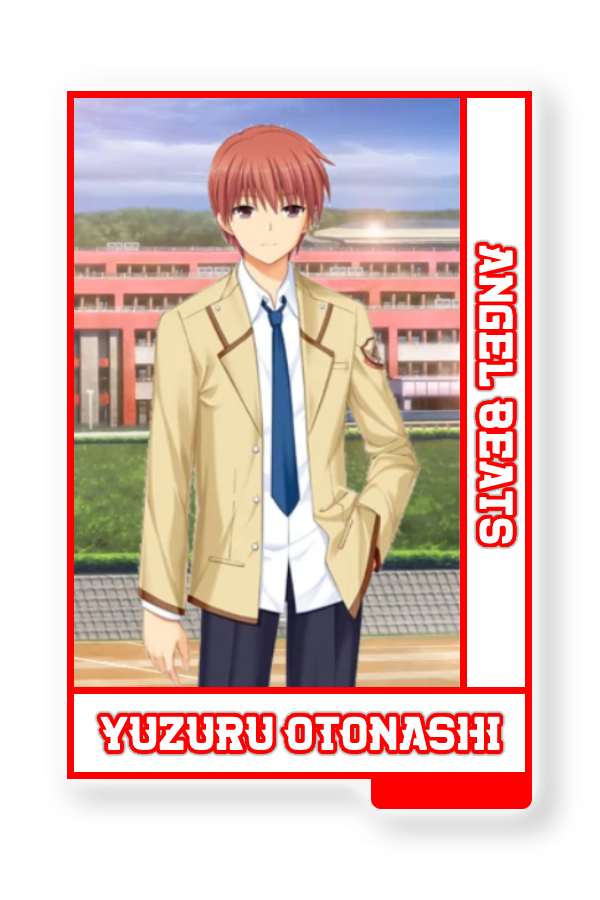
<style>
.page{position:relative;width:600px;height:900px;background:#ffffff}
.page>*{position:absolute;margin:0}
.t1{font:48.8px "KillerCollege";color:#ffffff}
.t2{font:48.6px "KillerCollege";color:#ffffff}
</style>
<div class="page">
<p class="t1" style="left:479px;top:245px;width:34px;height:299px;rotate:90deg">Angel Beats</p>
<p class="t2" style="left:100px;top:716px;width:400px;height:35px">YUZURU OTONASHI</p>
</div>
